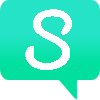
<style>
.page{position:relative;width:100px;height:100px;background:#ffffff}
.page>*{position:absolute;margin:0}
.t1{font:65.8px "Pacifico-Regular";color:#ffffff}
</style>
<div class="page">
<p class="t1" style="left:25px;top:9px;width:47px;height:61px">S</p>
</div>
